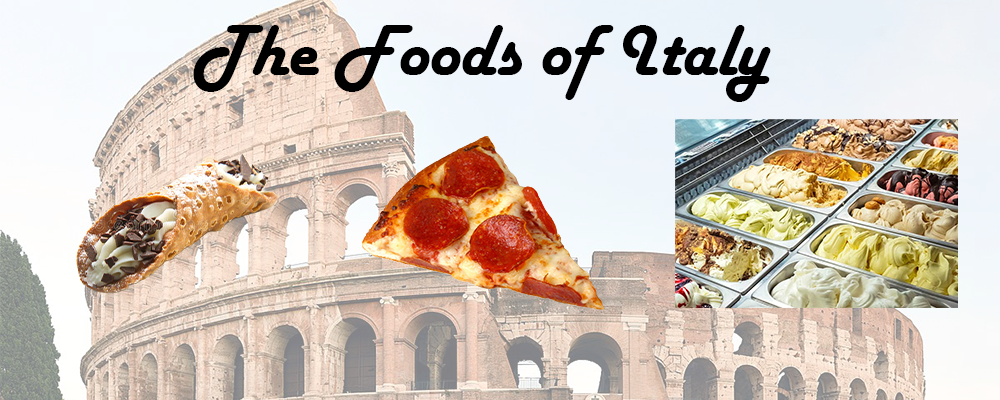
<style>
.page{position:relative;width:1000px;height:400px}
.page>*{position:absolute;margin:0}
.t1{font:75px "HarlowSolid";color:#000000}
</style>
<div class="page">
<p class="t1" style="left:193px;top:25px;width:578px;height:77px">The Foods of Italy</p>
</div>
